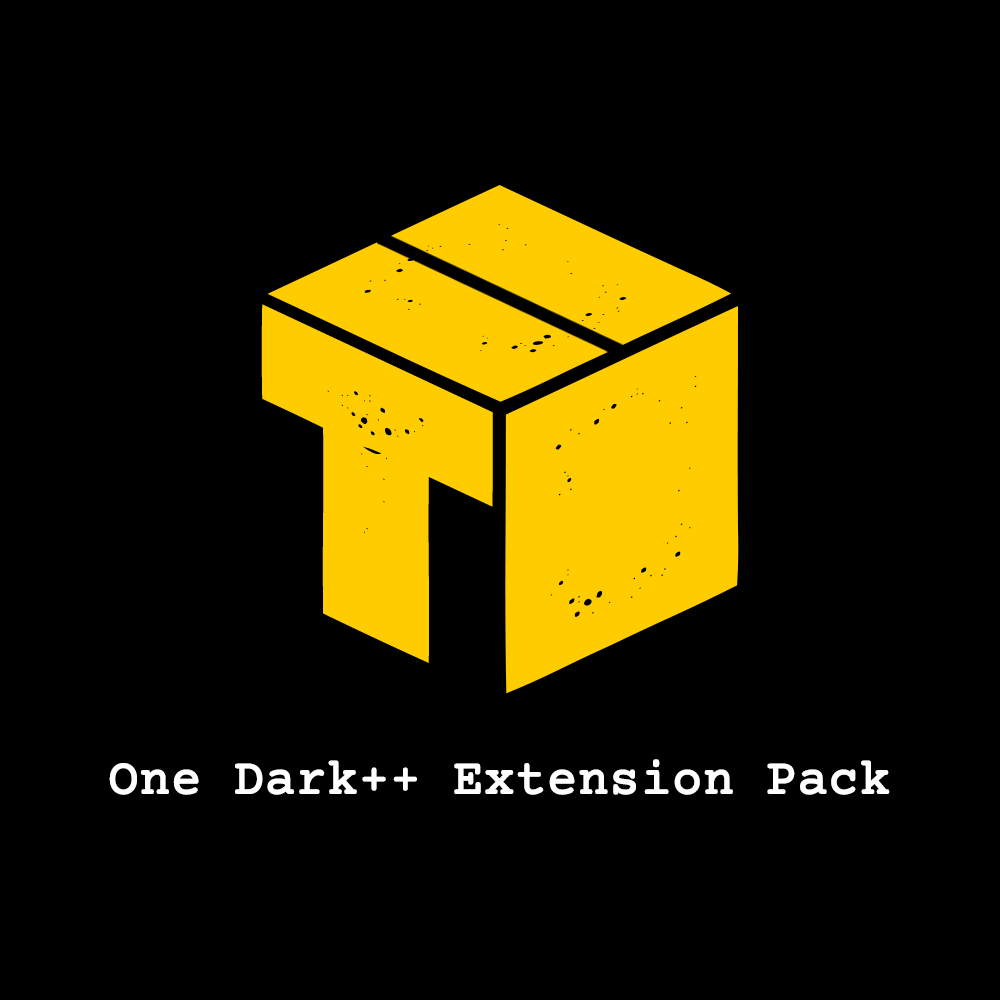
<style>
.page{position:relative;width:1000px;height:1000px;background:#000000}
.page>*{position:absolute;margin:0}
.t1{font:402.9px "ManiacGrunged-Regular";color:#ffcc00;scale:1.24 1}
.t2{font:50px "CourierPrime-Regular";color:#ffffff;font-weight:bold}
</style>
<div class="page">
<p class="t1" style="left:261px;top:304px;width:232px;height:359px;rotate:25deg">T</p>
<p class="t2" style="left:109px;top:759px;width:781px;height:36px">One Dark++ Extension Pack</p>
</div>
